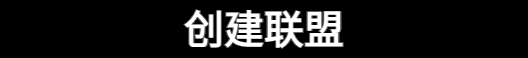
<style>
.page{position:relative;width:528px;height:58px;background:#000000}
.page>*{position:absolute;margin:0}
.t1{font:40px "WebPSD-18463539-0-Regular";color:#ffffff;font-weight:bold}
</style>
<div class="page">
<p class="t1" style="left:0px;top:0px;width:528px;height:58px">创建联盟</p>
</div>
